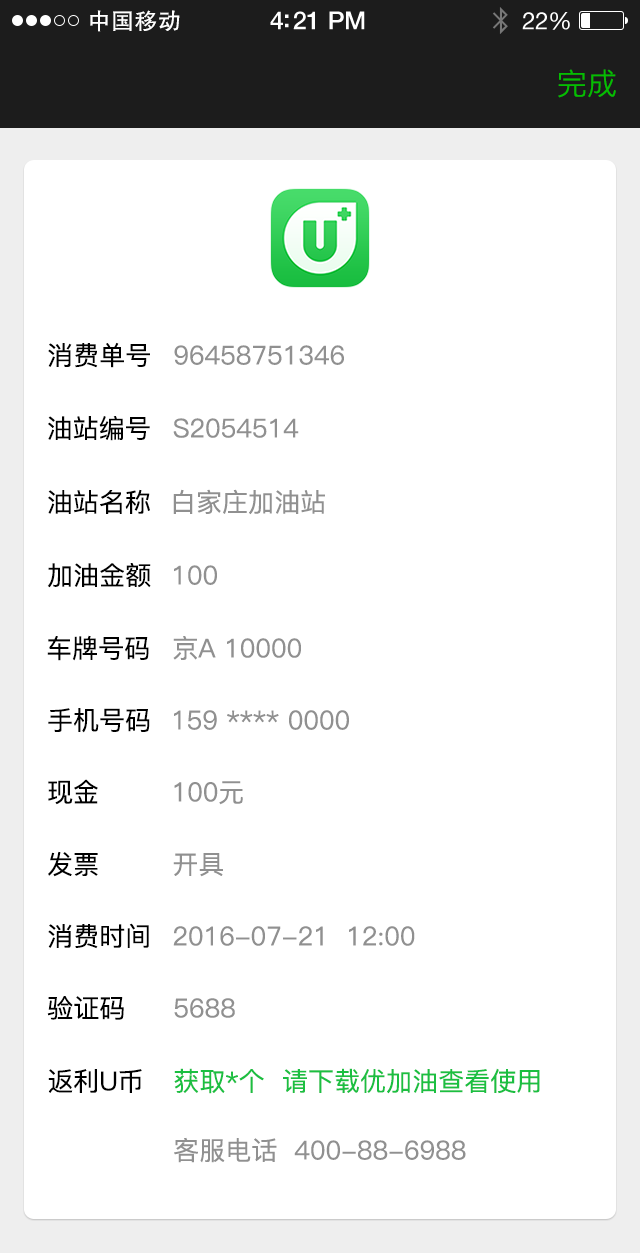
<style>
.page{position:relative;width:640px;height:1253px;background:#ffffff}
.page>*{position:absolute;margin:0}
.t1{font:23px "FZHTK--GBK1-0";letter-spacing:0.02em;color:#ffffff}
.t2{font:25px "HelveticaNeue-Medium";letter-spacing:-0.02em;color:#ffffff}
.t3{font:24px "HelveticaNeue";letter-spacing:-0.02em;color:#ffffff}
.t4{font:30px "PingFang-SC-Regular";color:#04be01}
.t5{font:26px "PingFang-SC-Medium";color:#000000}
.t6{font:26px "PingFang-SC-Medium";color:#909090}
.t7{font:26.1px "PingFang-SC-Medium";color:#000000}
.t8{font:26.1px "PingFang-SC-Medium";color:#909090}
.t9{font:26.3px "PingFang-SC-Medium";color:#000000}
.t10{font:26.3px "PingFang-SC-Medium";color:#909090}
.t11{font:26px "PingFang-SC-Medium";color:#1bbf41}
</style>
<div class="page">
<p class="t1" style="left:90px;top:10px;width:90px;height:22px">中国移动</p>
<p class="t2" style="left:270px;top:11px;width:95px;height:19px">4:21 PM</p>
<p class="t3" style="left:522px;top:12px;width:48px;height:18px">22%</p>
<p class="t4" style="left:558px;top:69px;width:58px;height:29px">完成</p>
<p class="t5" style="left:48px;top:342px;width:102px;height:26px">消费单号</p>
<p class="t6" style="left:174px;top:345px;width:170px;height:20px">96458751346</p>
<p class="t5" style="left:48px;top:416px;width:102px;height:25px">油站编号</p>
<p class="t6" style="left:173px;top:418px;width:126px;height:20px">S2054514</p>
<p class="t5" style="left:48px;top:489px;width:102px;height:25px">油站名称</p>
<p class="t6" style="left:173px;top:489px;width:152px;height:26px">白家庄加油站</p>
<p class="t5" style="left:47px;top:563px;width:104px;height:25px">加油金额</p>
<p class="t6" style="left:174px;top:565px;width:43px;height:20px">100</p>
<p class="t5" style="left:47px;top:635px;width:102px;height:26px">车牌号码</p>
<p class="t6" style="left:173px;top:636px;width:128px;height:24px">京A 10000</p>
<p class="t7" style="left:48px;top:708px;width:102px;height:25px">手机号码</p>
<p class="t8" style="left:174px;top:710px;width:175px;height:20px">159 **** 0000</p>
<p class="t9" style="left:48px;top:779px;width:50px;height:26px">现金</p>
<p class="t10" style="left:174px;top:781px;width:69px;height:24px">100元</p>
<p class="t5" style="left:48px;top:851px;width:50px;height:26px">发票</p>
<p class="t6" style="left:173px;top:853px;width:50px;height:24px">开具</p>
<p class="t5" style="left:48px;top:923px;width:101px;height:26px">消费时间</p>
<p class="t6" style="left:173px;top:926px;width:242px;height:20px">2016-07-21  12:00</p>
<p class="t5" style="left:47px;top:996px;width:77px;height:24px">验证码</p>
<p class="t6" style="left:174px;top:998px;width:61px;height:20px">5688</p>
<p class="t5" style="left:48px;top:1069px;width:94px;height:24px">返利U币</p>
<p class="t11" style="left:174px;top:1068px;width:366px;height:26px">获取*个  请下载优加油查看使用</p>
<p class="t6" style="left:174px;top:1137px;width:103px;height:26px">客服电话</p>
<p class="t6" style="left:294px;top:1140px;width:172px;height:20px">400-88-6988</p>
</div>
